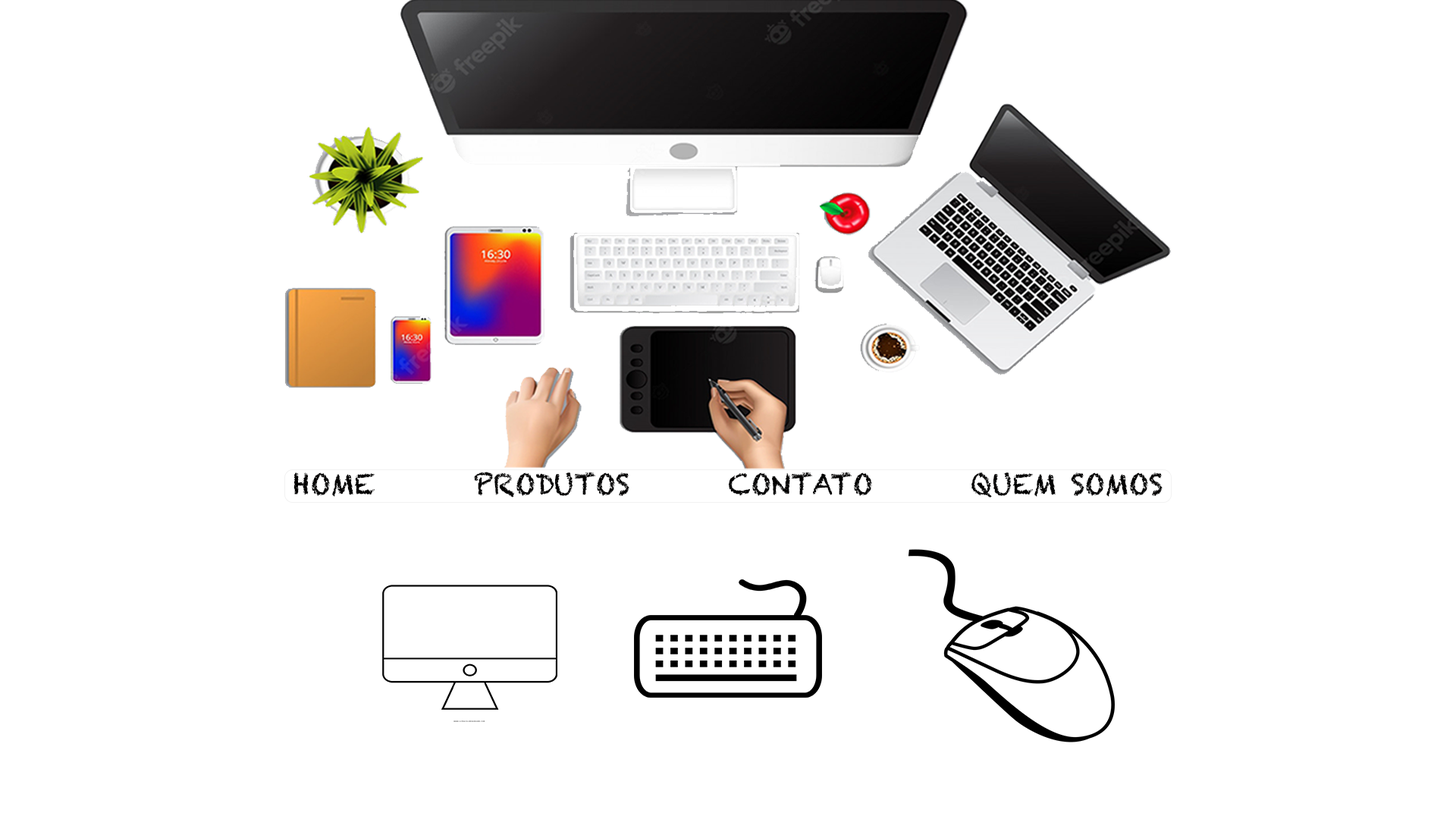
<style>
.page{position:relative;width:1456px;height:819px;background:#ffffff}
.page>*{position:absolute;margin:0}
.t1{font:28.2px "Chalkduster";color:#010000}
</style>
<div class="page">
<p class="t1" style="left:293px;top:472px;width:870px;height:25px">HOME       PRODUTOS       CONTATO       QUEM SOMOS</p>
</div>
